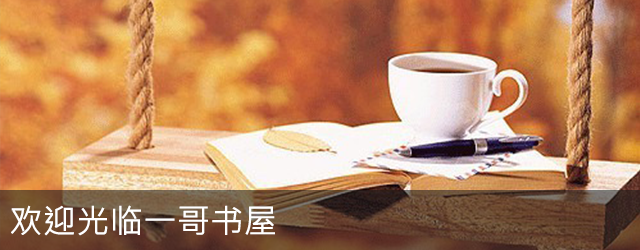
<style>
.page{position:relative;width:640px;height:250px}
.page>*{position:absolute;margin:0}
.t1{font:32.6px "MicrosoftJhengHeiUIRegular";color:#ffffff;font-weight:bold}
</style>
<div class="page">
<p class="t1" style="left:11px;top:205px;width:264px;height:31px">欢迎光临一哥书屋</p>
</div>
